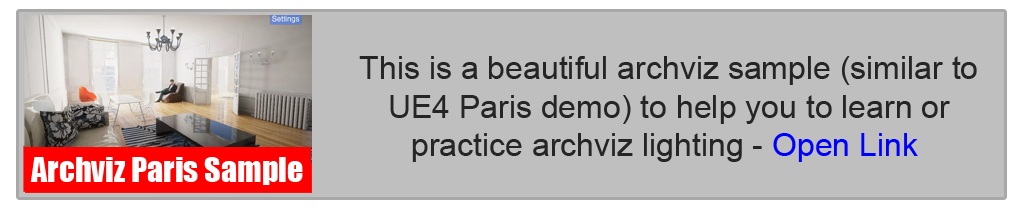
<style>
.page{position:relative;width:1024px;height:210px;background:#bfbfbf}
.page>*{position:absolute;margin:0}
.t1{font:32px "ArialMT";color:#252525}
.t2{font:32px "ArialMT";color:#0000ff}
.t3{font:32px "Impact";color:#ffffff}
</style>
<div class="page">
<p class="t1" style="left:359px;top:56px;width:618px;height:106px;text-align:center">This is a beautiful archviz sample (similar to <br>UE4 Paris demo) to help you to learn or <br>practice archviz lighting - <span class="t2">Open Link</span></p>
<p class="t3" style="left:30px;top:157px;width:273px;height:28px">Archviz Paris Sample</p>
</div>
